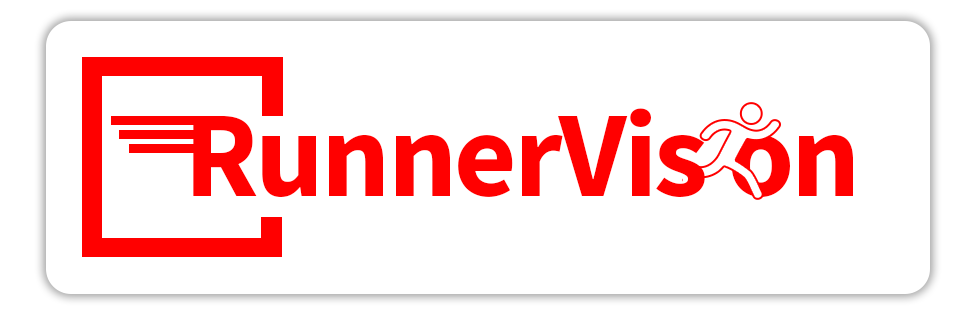
<style>
.page{position:relative;width:975px;height:314px;background:#ffffff}
.page>*{position:absolute;margin:0}
.t1{font:121.5px "SourceSansPro-Bold";letter-spacing:-0.025em;color:#ff0000}
</style>
<div class="page">
<p class="t1" style="left:193px;top:108px;width:512px;height:90px">RunnerVis</p>
<p class="t1" style="left:731px;top:135px;width:122px;height:63px">on</p>
</div>
